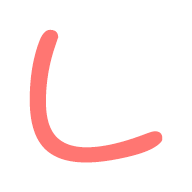
<style>
.page{position:relative;width:192px;height:192px;background:#ffffff}
.page>*{position:absolute;margin:0}
.t1{font:200px "DFPShaoNvW5";color:#ff7672}
</style>
<div class="page">
<p class="t1" style="left:29px;top:29px;width:134px;height:134px">L</p>
</div>
